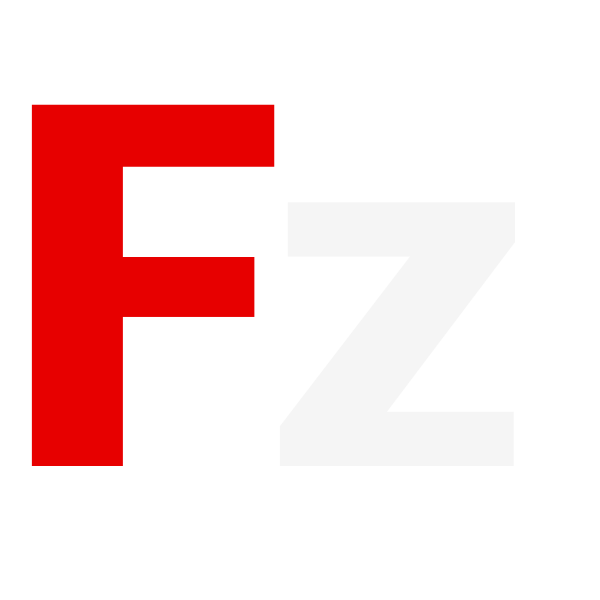
<style>
.page{position:relative;width:600px;height:600px;background:#ffffff}
.page>*{position:absolute;margin:0}
.t1{font:516px "JockeyOne-Regular";color:#e80000;scale:1.29 1}
.t2{font:516px "JockeyOne-Regular";color:#f6f6f6;scale:1.29 1}
</style>
<div class="page">
<p class="t1" style="left:31px;top:104px;width:484px;height:362px">F<span class="t2">z</span></p>
</div>
